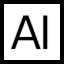
<style>
.page{position:relative;width:64px;height:64px;background:#ffffff}
.page>*{position:absolute;margin:0}
.t1{font:48px "Purista-Medium";color:#000000}
</style>
<div class="page">
<p class="t1" style="left:11px;top:15px;width:37px;height:34px">AI</p>
</div>
